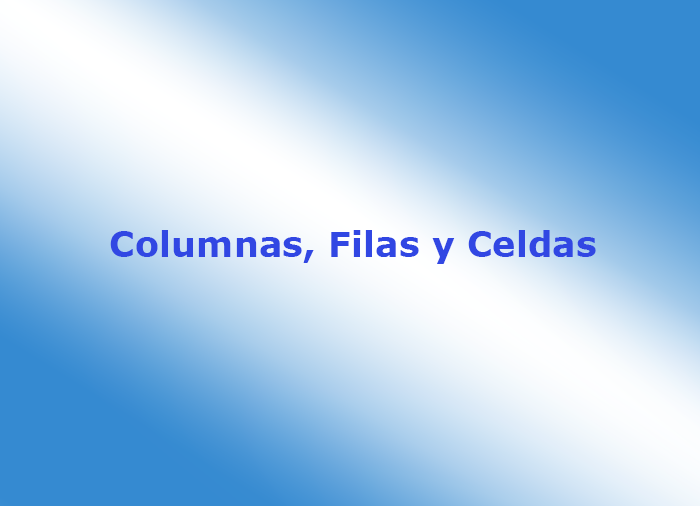
<style>
.page{position:relative;width:700px;height:506px}
.page>*{position:absolute;margin:0}
.t1{font:35.3px "Verdana-Bold";color:#3147e3}
</style>
<div class="page">
<p class="t1" style="left:110px;top:230px;width:486px;height:34px">Columnas, Filas y Celdas</p>
</div>
